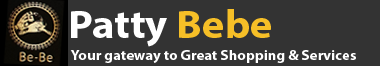
<style>
.page{position:relative;width:380px;height:66px;background:#333333}
.page>*{position:absolute;margin:0}
.t1{font:40px "MyriadPro-Bold";color:#ffffff;scale:1.06 1}
.t2{font:40px "MyriadPro-Bold";color:#f6bf27;scale:1.06 1}
.t3{font:14px "MyriadPro-Bold";color:#ffffff;scale:1.06 1}
</style>
<div class="page">
<p class="t1" style="left:71px;top:9px;width:200px;height:38px">Patty <span class="t2">Bebe</span></p>
<p class="t3" style="left:70px;top:50px;width:286px;height:13px">Your gateway to Great Shopping &amp; Services</p>
</div>
